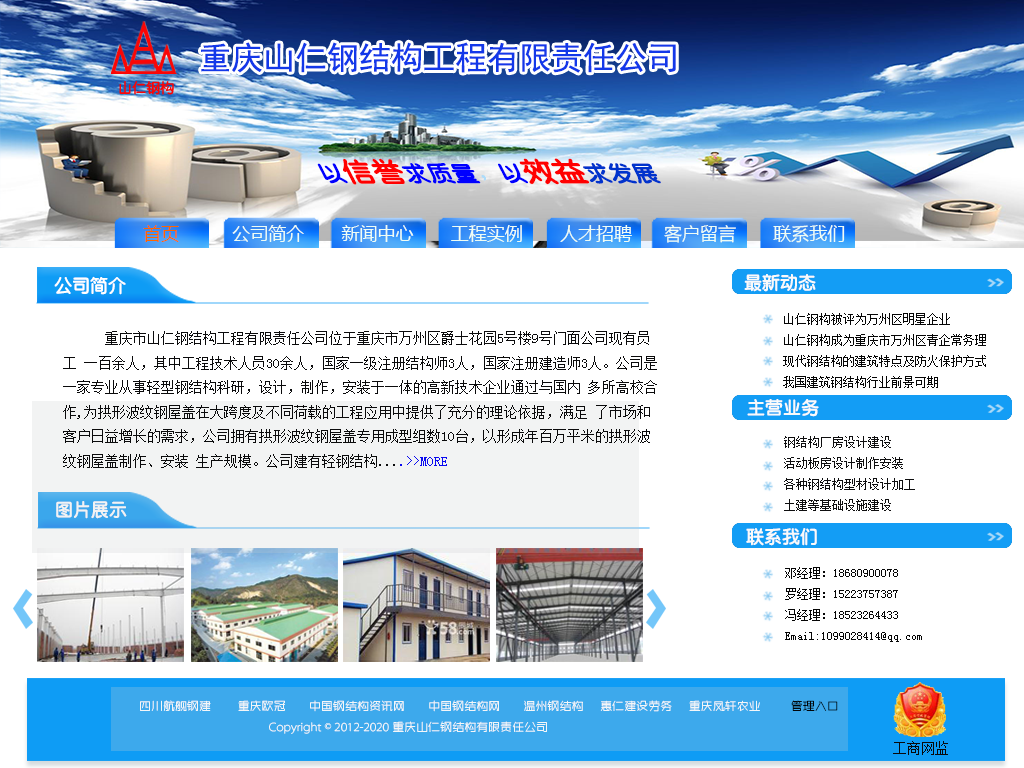
<style>
.page{position:relative;width:1024px;height:768px;background:#ffffff}
.page>*{position:absolute;margin:0}
.t1{font:32px "SimHei";color:#1338e9}
.t2{font:18px "MicrosoftYaHei";color:#effdf4}
.t3{font:18px "MicrosoftYaHei";color:#ff6600}
.t4{font:18px "GBYenRound-Heavy";color:#ffffff}
.t5{font:18px "GBYenRound-Heavy";color:#fafafa}
.t6{font:12px "SimSun";color:#050505}
.t7{font:14px "SimSun";color:#0a0a0b}
.t8{font:14px "SimSun";color:#0a0af0}
.t9{font:12px "SimSun";color:#0e0e0f}
.t10{font:12px "ZHSRXT--GBK1-0";color:#f4f6f8}
.t11{font:12px "ZHSRXT--GBK1-0";color:#010609}
.t12{font:12px "SimSun";color:#f4f6f8}
</style>
<div class="page">
<p class="t1" style="left:201px;top:42px;width:475px;height:31px">重庆山仁钢结构工程有限责任公司</p>
<p class="t2" style="left:143px;top:224px;width:702px;height:19px"><span class="t3">首页  </span>        公司简介       新闻中心       工程实例       人才招聘      客户留言       联系我们</p>
<p class="t4" style="left:54px;top:276px;width:72px;height:19px">公司简介</p>
<p class="t5" style="left:744px;top:274px;width:72px;height:18px">最新动态</p>
<p class="t6" style="left:783px;top:313px;width:203px;height:75px">山仁钢构被评为万州区明星企业 <br>山仁钢构成为重庆市万州区青企常务理 <br>现代钢结构的建筑特点及防火保护方式 <br>我国建筑钢结构行业前景可期 <br>&gt;&gt;2011年度中国钢铁业大事记 2012-10-12<br>&gt;&gt;中国钢结构行业现状分析 2012-10-12</p>
<p class="t7" style="left:63px;top:331px;width:594px;height:137px">重庆市山仁钢结构工程有限责任公司位于重庆市万州区爵士花园5号楼9号门面公司现有员工 一百余人，其中工程技术人员30余人，国家一级注册结构师3人，国家注册建造师3人。公司是一家专业从事轻型钢结构科研，设计，制作，安装于一体的高新技术企业通过与国内 多所高校合作,为拱形波纹钢屋盖在大跨度及不同荷载的工程应用中提供了充分的理论依据，满足 了市场和客户日益增长的需求，公司拥有拱形波纹钢屋盖专用成型组数10台，以形成年百万平米的拱形波纹钢屋盖制作、安装 生产规模。公司建有轻钢结构...<span class="t8">.&gt;&gt;MORE</span></p>
<p class="t5" style="left:747px;top:399px;width:72px;height:18px">主营业务</p>
<p class="t9" style="left:784px;top:436px;width:131px;height:75px">钢结构厂房设计建设<br>   活动板房设计制作安装<br>   各种钢结构型材设计加工<br>   土建等基础设施建设</p>
<p class="t4" style="left:56px;top:501px;width:71px;height:18px">图片展示</p>
<p class="t5" style="left:746px;top:528px;width:71px;height:18px">联系我们</p>
<p class="t6" style="left:785px;top:567px;width:137px;height:75px">邓经理：18680900078 <br>　　罗经理：15223757387 <br>　　冯经理：18523264433<br>　　Email:1099028414@qq.com</p>
<p class="t10" style="left:140px;top:700px;width:698px;height:34px">四川航舰钢建        重庆欧冠       中国钢结构资讯网       中国钢结构网       温州钢结构     惠仁建设劳务     重庆凤轩农业         <span class="t11">管理入口<br></span>                                       Copyright <span class="t12">©</span> 2012-2020 重庆山仁钢结构有限责任公司</p>
<p class="t7" style="left:893px;top:741px;width:55px;height:14px">工商网监</p>
</div>
